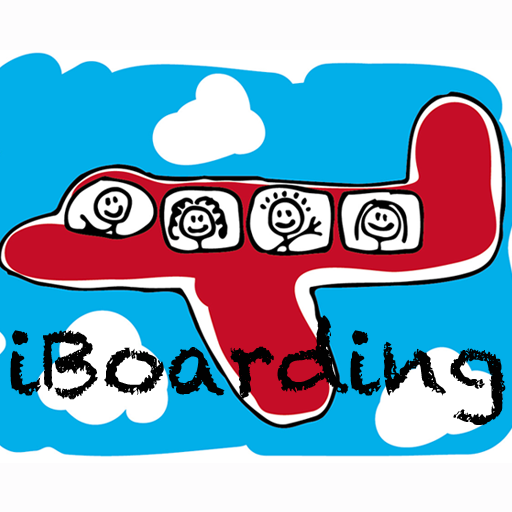
<style>
.page{position:relative;width:512px;height:512px;background:#02afe9}
.page>*{position:absolute;margin:0}
.t1{font:90px "Chalkduster";color:#010101}
.t2{font:90px "BradleyHandITCTTBold";color:#010101}
</style>
<div class="page">
<p class="t1" style="left:10px;top:315px;width:496px;height:110px"><span class="t2"> </span>iBoarding</p>
</div>
